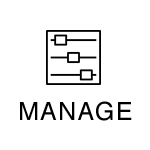
<style>
.page{position:relative;width:150px;height:150px;background:#ffffff}
.page>*{position:absolute;margin:0}
.t1{font:25px "Helvetica";letter-spacing:0.05em;color:#000000}
</style>
<div class="page">
<p class="t1" style="left:20px;top:101px;width:112px;height:20px">MANAGE</p>
</div>
